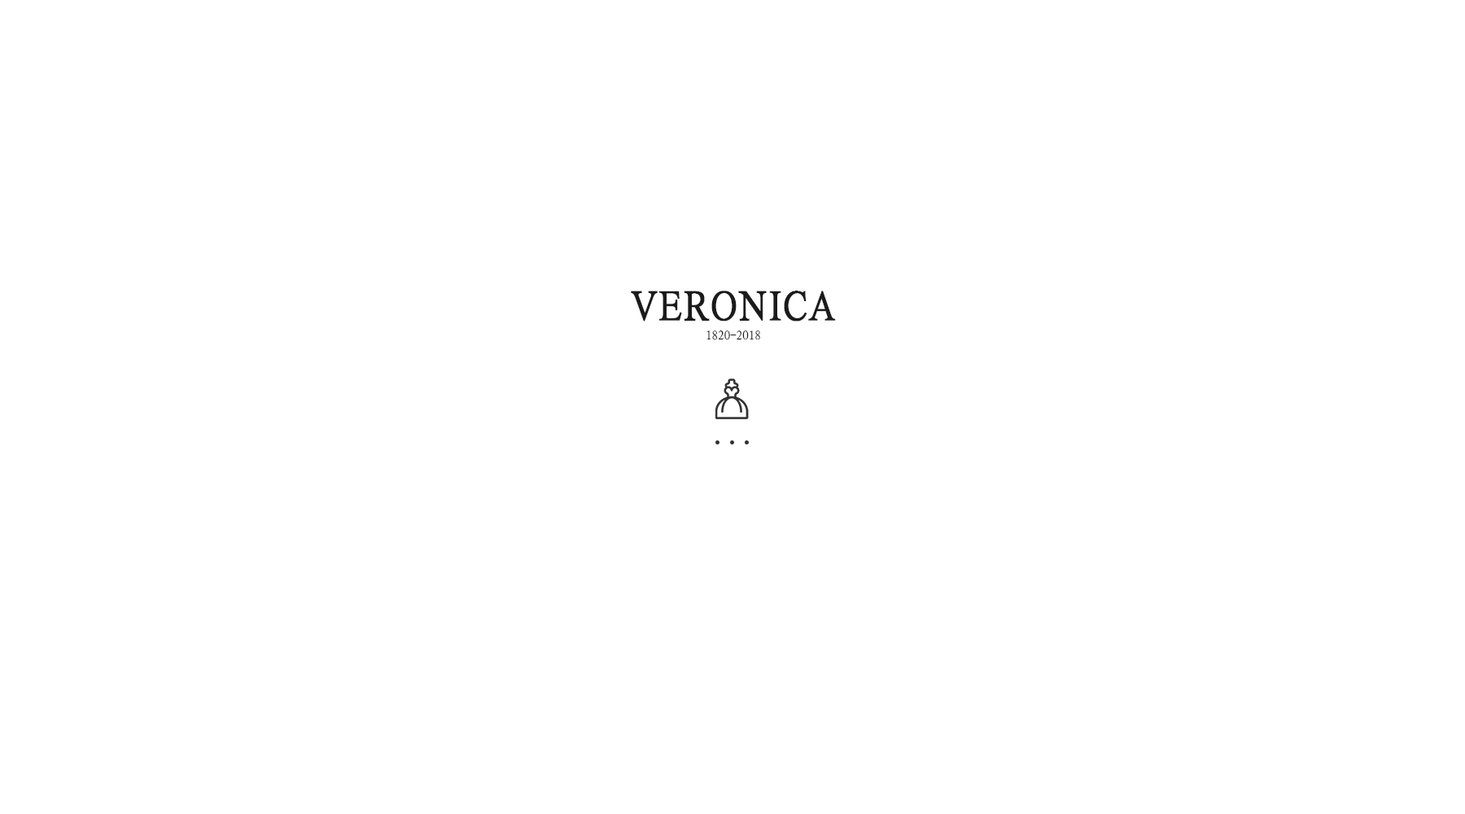
<style>
.page{position:relative;width:1465px;height:814px;background:#ffffff}
.page>*{position:absolute;margin:0}
.t1{font:43.2px "SIL-Kai-Reg-Jian";color:#1b1b1b;font-weight:bold;scale:0.87 1}
.t2{font:12.7px "SIL-Kai-Reg-Jian";color:#1c1c1c;scale:0.96 1}
</style>
<div class="page">
<p class="t1" style="left:631px;top:291px;width:205px;height:30px">VERONICA</p>
<p class="t2" style="left:706px;top:330px;width:54px;height:10px">1820-2018</p>
</div>
